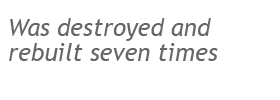
<style>
.page{position:relative;width:280px;height:100px;background:#ffffff}
.page>*{position:absolute;margin:0}
.t1{font:24px/25px "TrebuchetMS-Italic";color:#666666}
</style>
<div class="page">
<p class="t1" style="left:9px;top:18px;width:209px;height:43px">Was destroyed and <br>rebuilt seven times</p>
</div>
